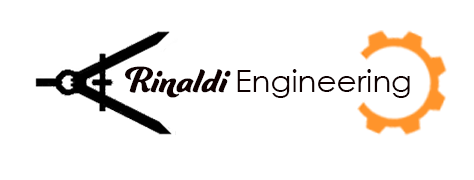
<style>
.page{position:relative;width:474px;height:180px;background:#ffffff}
.page>*{position:absolute;margin:0}
.t1{font:31px "CenturyGothic";color:#0f0101}
.t2{font:38.7px "Ganache";color:#0f0101}
</style>
<div class="page">
<p class="t1" style="left:125px;top:66px;width:285px;height:32px"><span class="t2">Rinaldi </span>Engineering</p>
</div>
